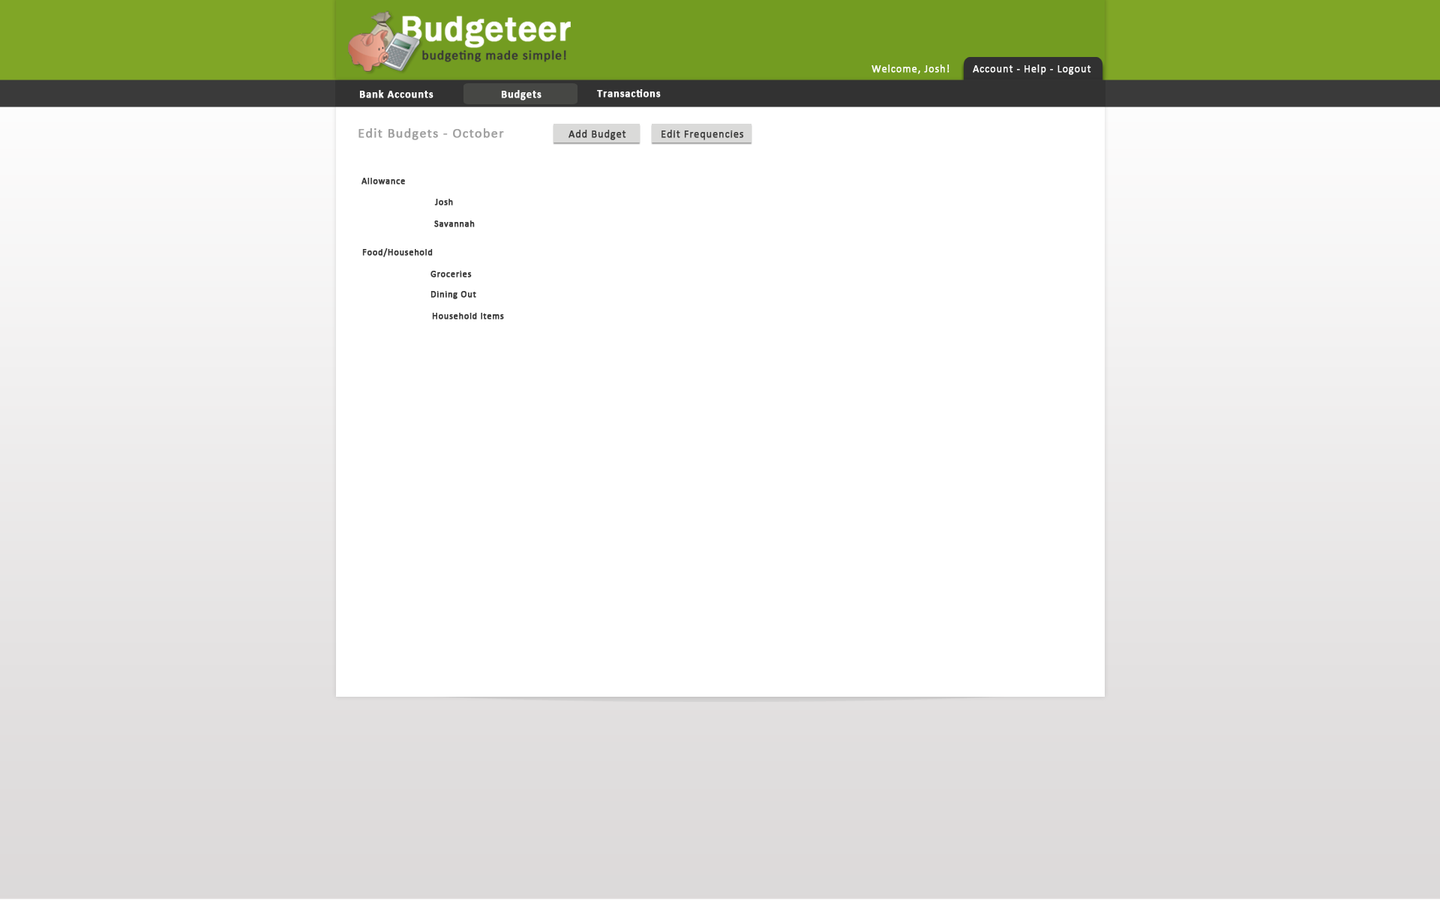
<style>
.page{position:relative;width:1440px;height:900px;background:#ffffff}
.page>*{position:absolute;margin:0}
.t1{font:13.5px "Calibri";letter-spacing:0.05em;color:#a0a0a0;font-weight:bold}
.t2{font:10.5px "Calibri";letter-spacing:0.05em;color:#3a3a3a;font-weight:bold}
.t3{font:9px "Calibri";letter-spacing:0.05em;color:#3a3a3a;font-weight:bold}
</style>
<div class="page">
<p class="t1" style="left:358px;top:128px;width:146px;height:12px">Edit Budgets - October</p>
<p class="t2" style="left:568px;top:130px;width:58px;height:10px">Add Budget</p>
<p class="t2" style="left:661px;top:130px;width:83px;height:10px">Edit Frequencies</p>
<p class="t3" style="left:361px;top:178px;width:44px;height:6px">Allowance</p>
<p class="t3" style="left:434px;top:199px;width:19px;height:6px">Josh</p>
<p class="t3" style="left:434px;top:220px;width:41px;height:7px">Savannah</p>
<p class="t3" style="left:362px;top:248px;width:71px;height:9px">Food/Household</p>
<p class="t3" style="left:430px;top:271px;width:42px;height:6px">Groceries</p>
<p class="t3" style="left:430px;top:291px;width:46px;height:8px">Dining Out</p>
<p class="t3" style="left:432px;top:313px;width:72px;height:6px">Household Items</p>
</div>
